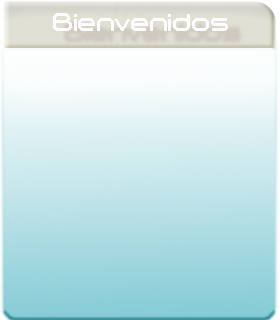
<style>
.page{position:relative;width:280px;height:320px}
.page>*{position:absolute;margin:0}
.t1{font:24px "Dekers_Bold";letter-spacing:-0.01em;color:#fdfbfb}
</style>
<div class="page">
<p class="t1" style="left:53px;top:13px;width:175px;height:18px">Bienvenidos</p>
</div>
